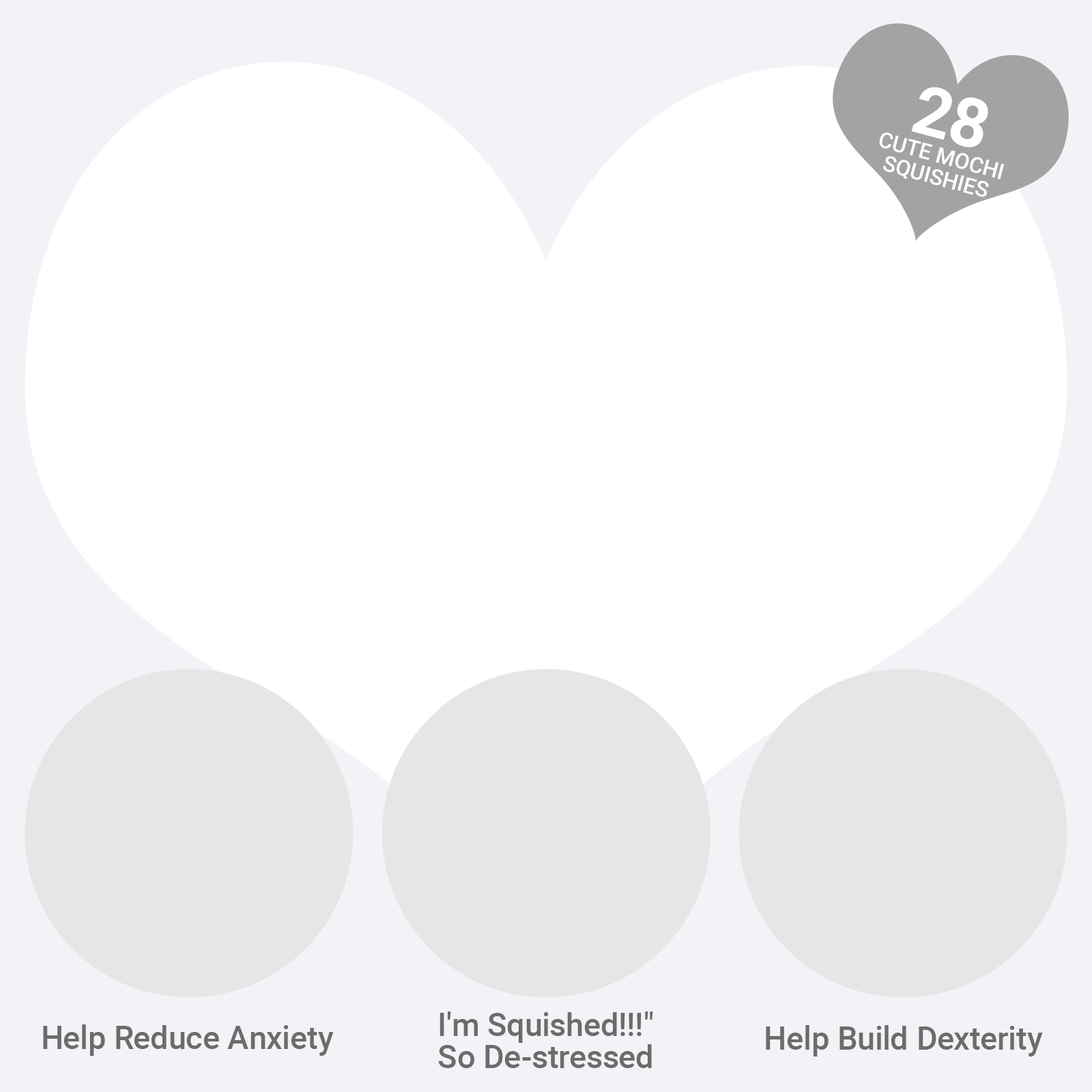
<style>
.page{position:relative;width:1092px;height:1092px;background:#ffffff}
.page>*{position:absolute;margin:0}
.t1{font:68.2px "Roboto-Bold";color:#ffffff}
.t2{font:21.8px/21.8px "Roboto-Medium";color:#ffffff}
.t3{font:32px/32px "Roboto-Medium";color:#6c6c6c}
.t4{font:32px "Roboto-Medium";color:#6c6c6c}
</style>
<div class="page">
<p class="t1" style="left:911px;top:87px;width:77px;height:60px;rotate:15deg">28</p>
<p class="t2" style="left:879px;top:132px;width:126px;height:65px;text-align:center;rotate:15deg">CUTE MOCHI<br>SQUISHIES</p>
<p class="t3" style="left:438px;top:1011px;width:215px;height:57px;text-align:center">I'm Squished!!!"<br>So De-stressed</p>
<p class="t4" style="left:43px;top:1024px;width:291px;height:32px">Help Reduce Anxiety</p>
<p class="t4" style="left:766px;top:1025px;width:277px;height:31px">Help Build Dexterity</p>
</div>
